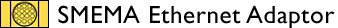
<style>
.page{position:relative;width:338px;height:28px;background:#ffffff}
.page>*{position:absolute;margin:0}
.t1{font:25px "GillSansMT";letter-spacing:0.025em;color:#010101}
</style>
<div class="page">
<p class="t1" style="left:58px;top:5px;width:277px;height:23px">SMEMA Ethernet Adaptor</p>
</div>
